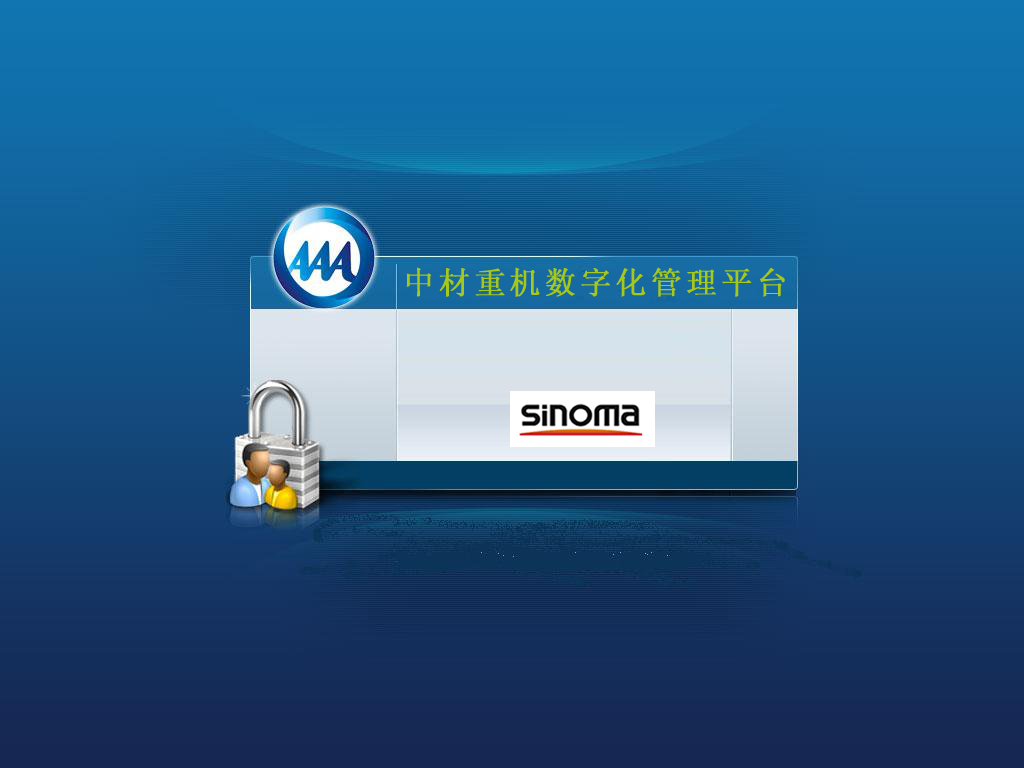
<style>
.page{position:relative;width:1024px;height:768px}
.page>*{position:absolute;margin:0}
.t1{font:30.7px "NSimSun";letter-spacing:0.125em;color:#a5c81b;font-weight:bold}
</style>
<div class="page">
<p class="t1" style="left:406px;top:267px;width:379px;height:30px">中材重机数字化管理平台</p>
</div>
